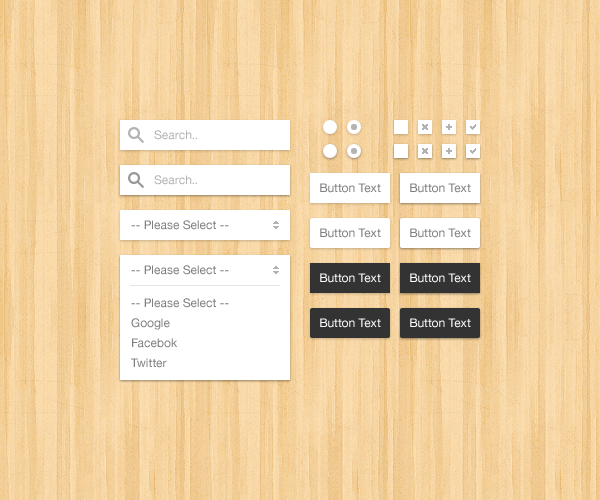
<style>
.page{position:relative;width:600px;height:500px}
.page>*{position:absolute;margin:0}
.t1{font:12px "HelveticaNeue";color:#b3b3b3}
.t2{font:12px "HelveticaNeue";color:#808080}
.t3{font:12px "HelveticaNeue";color:#ffffff}
.t4{font:12px/20px "HelveticaNeue";color:#808080}
</style>
<div class="page">
<p class="t1" style="left:154px;top:130px;width:43px;height:10px">Search..</p>
<p class="t1" style="left:154px;top:175px;width:43px;height:10px">Search..</p>
<p class="t2" style="left:320px;top:183px;width:61px;height:10px">Button Text</p>
<p class="t2" style="left:410px;top:183px;width:61px;height:10px">Button Text</p>
<p class="t2" style="left:131px;top:220px;width:98px;height:10px">-- Please Select --</p>
<p class="t2" style="left:320px;top:228px;width:61px;height:10px">Button Text</p>
<p class="t2" style="left:410px;top:228px;width:61px;height:10px">Button Text</p>
<p class="t2" style="left:131px;top:265px;width:98px;height:10px">-- Please Select --</p>
<p class="t3" style="left:320px;top:273px;width:61px;height:10px">Button Text</p>
<p class="t3" style="left:410px;top:273px;width:61px;height:10px">Button Text</p>
<p class="t4" style="left:131px;top:298px;width:98px;height:70px">-- Please Select --<br>Google<br>Facebok<br>Twitter</p>
<p class="t3" style="left:320px;top:318px;width:61px;height:10px">Button Text</p>
<p class="t3" style="left:410px;top:318px;width:61px;height:10px">Button Text</p>
</div>
